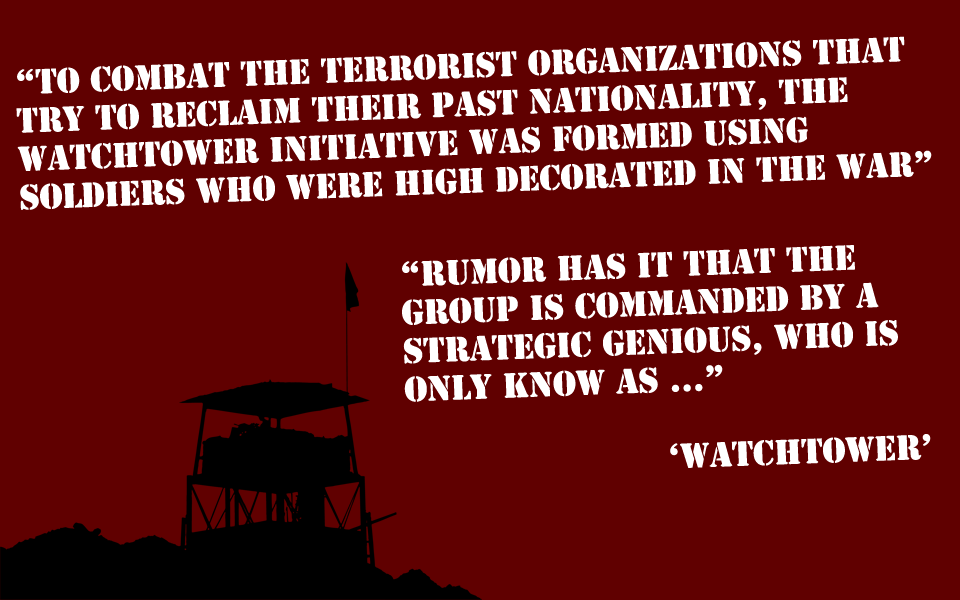
<style>
.page{position:relative;width:960px;height:600px;background:#600000}
.page>*{position:absolute;margin:0}
.t1{font:32px "StencilStd";color:#ffffff}
</style>
<div class="page">
<p class="t1" style="left:16px;top:36px;width:916px;height:174px;rotate:-2deg">“To combat the terrorist organizations that<br>try to reclaim their past nationality, the<br>watchtower initiative was formed using<br>soldiers who were high decorated in the war”</p>
<p class="t1" style="left:402px;top:245px;width:529px;height:223px;rotate:-2deg">“Rumor has it that the<br>group is commanded by a<br>strategic genious, who is<br>only know as ...”<br><br>                        ‘Watchtower’</p>
</div>
